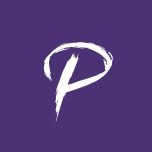
<style>
.page{position:relative;width:152px;height:152px;background:#4b3273}
.page>*{position:absolute;margin:0}
.t1{font:100px "RuachLetPlain";color:#ffffff}
</style>
<div class="page">
<p class="t1" style="left:43px;top:42px;width:70px;height:80px">P</p>
</div>
